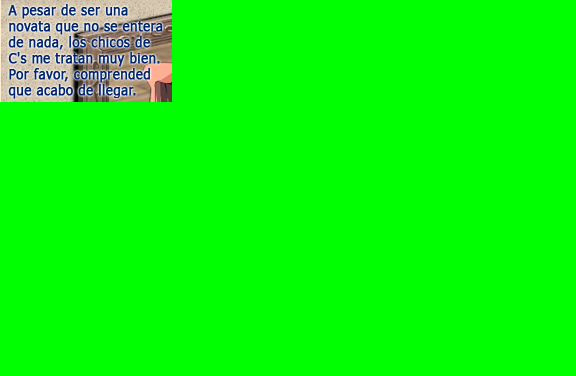
<style>
.page{position:relative;width:576px;height:376px;background:#00ff00}
.page>*{position:absolute;margin:0}
.t1{font:14px/16px "Tahoma";letter-spacing:0.04em;color:#00256d;font-weight:bold;scale:0.9 1}
</style>
<div class="page">
<p class="t1" style="left:8px;top:4px;width:155px;height:95px">A pesar de ser una<br>novata que no se entera<br>de nada, los chicos de<br>C's me tratan muy bien.<br>Por favor, comprended<br>que acabo de llegar.</p>
</div>
